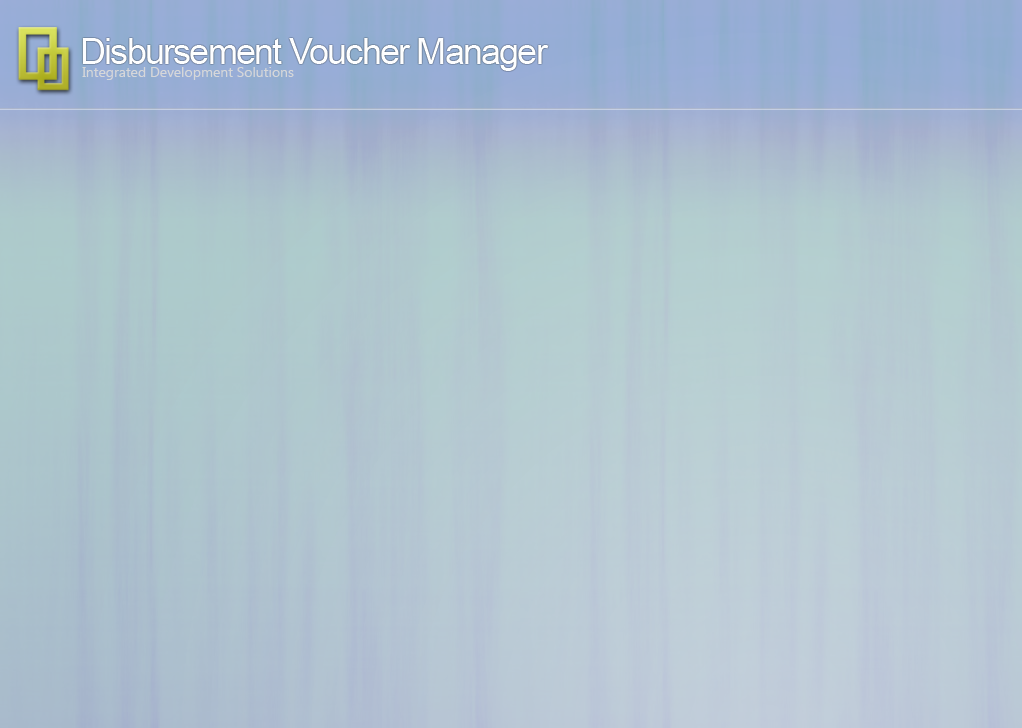
<style>
.page{position:relative;width:1022px;height:728px}
.page>*{position:absolute;margin:0}
.t1{font:36px "ArialMT";letter-spacing:-0.05em;color:#fdfeff}
.t2{font:14px "SegoeUI";color:#d6d7d9}
</style>
<div class="page">
<p class="t1" style="left:82px;top:38px;width:467px;height:33px">Disbursement Voucher Manager</p>
<p class="t2" style="left:82px;top:67px;width:212px;height:13px">Integrated Development Solutions</p>
</div>
